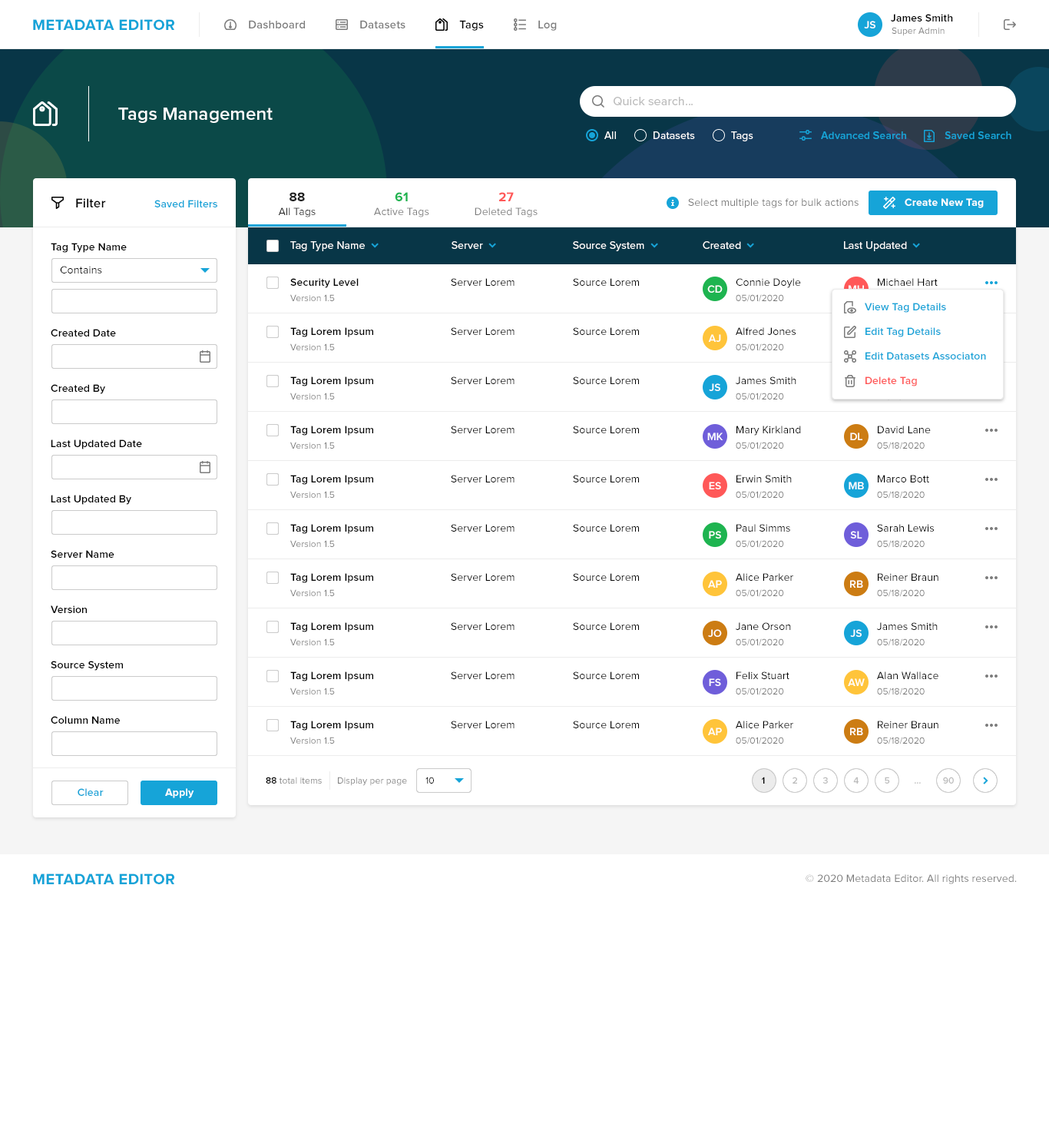
<style>
.page{position:relative;width:1049px;height:1137px;background:#ffffff}
.page>*{position:absolute;margin:0}
.t1{font:10.8px "ProximaNova-Semibold";letter-spacing:0.01em;color:#000000}
.t2{font:15.4px "ProximaNova-Bold";letter-spacing:0.025em;color:#16a4d8;text-transform:uppercase}
.t3{font:11.5px "ProximaNova-Semibold";letter-spacing:0.01em;color:#7c7c7c}
.t4{font:11.5px "ProximaNova-Semibold";letter-spacing:0.01em;color:#000000}
.t5{font:10.8px "ProximaNova-Semibold";letter-spacing:0.01em;color:#ffffff}
.t6{font:9.2px "ProximaNova-Regular";letter-spacing:0.01em;color:#7c7c7c}
.t7{font:12.3px "ProximaNova-Regular";letter-spacing:0.01em;color:#bcbcbc}
.t8{font:18.4px "ProximaNova-Semibold";letter-spacing:0.01em;color:#ffffff}
.t9{font:10.8px "ProximaNova-Regular";letter-spacing:0.01em;color:#ffffff}
.t10{font:10.8px "ProximaNova-Semibold";letter-spacing:0.01em;color:#16a4d8}
.t11{font:13.1px "ProximaNova-Bold";letter-spacing:0.01em;color:#212121}
.t12{font:13.1px "ProximaNova-Bold";letter-spacing:0.01em;color:#1eb450}
.t13{font:13.1px "ProximaNova-Bold";letter-spacing:0.01em;color:#ff5858}
.t14{font:13.1px "ProximaNova-Semibold";letter-spacing:0.01em;color:#000000}
.t15{font:10.8px "ProximaNova-Regular";letter-spacing:0.01em;color:#212121}
.t16{font:10.8px "ProximaNova-Regular";letter-spacing:0.01em;color:#7c7c7c}
.t17{font:10.8px "ProximaNova-Bold";letter-spacing:0.01em;color:#ffffff}
.t18{font:10.8px "ProximaNova-Regular";letter-spacing:0.01em;color:#000000}
.t19{font:10.8px/49.2px "ProximaNova-Semibold";letter-spacing:0.01em;color:#000000}
.t20{font:10.8px/49.2px "ProximaNova-Regular";letter-spacing:0.01em;color:#000000}
.t21{font:9.2px/49.2px "ProximaNova-Regular";letter-spacing:0.01em;color:#7c7c7c}
.t22{font:10.8px/24.6px "ProximaNova-Semibold";letter-spacing:0.01em;color:#16a4d8}
.t23{font:10.8px/24.6px "ProximaNova-Semibold";letter-spacing:0.01em;color:#ff5858}
.t24{font:9.2px "ProximaNova-Semibold";letter-spacing:0.01em;color:#000000}
.t25{font:9.2px "ProximaNova-Regular";letter-spacing:0.01em;color:#000000}
.t26{font:9.2px "ProximaNova-Semibold";letter-spacing:0.01em;color:#bcbcbc}
.t27{font:9.2px "ProximaNova-Semibold";letter-spacing:0.01em}
</style>
<div class="page">
<p class="t1" style="left:891px;top:14px;width:62px;height:8px">James Smith</p>
<p class="t2" style="left:33px;top:19px;width:141px;height:11px">Metadata Editor</p>
<p class="t3" style="left:249px;top:20px;width:56px;height:8px">Dashboard</p>
<p class="t3" style="left:360px;top:20px;width:46px;height:8px">Datasets</p>
<p class="t4" style="left:459px;top:20px;width:25px;height:11px">Tags</p>
<p class="t3" style="left:538px;top:20px;width:19px;height:11px">Log</p>
<p class="t5" style="left:864px;top:21px;width:12px;height:7px">JS</p>
<p class="t6" style="left:892px;top:27px;width:53px;height:9px">Super Admin</p>
<p class="t7" style="left:614px;top:97px;width:79px;height:9px">Quick search...</p>
<p class="t8" style="left:118px;top:108px;width:155px;height:15px">Tags Management</p>
<p class="t9" style="left:604px;top:131px;width:12px;height:8px">All</p>
<p class="t9" style="left:654px;top:131px;width:41px;height:8px">Datasets</p>
<p class="t9" style="left:731px;top:131px;width:22px;height:10px">Tags</p>
<p class="t10" style="left:821px;top:131px;width:85px;height:8px">Advanced Search</p>
<p class="t10" style="left:945px;top:131px;width:66px;height:8px">Saved Search</p>
<p class="t11" style="left:290px;top:192px;width:15px;height:9px">88</p>
<p class="t12" style="left:395px;top:192px;width:13px;height:9px">61</p>
<p class="t13" style="left:498px;top:192px;width:16px;height:9px">27</p>
<p class="t14" style="left:76px;top:198px;width:30px;height:9px">Filter</p>
<p class="t10" style="left:154px;top:200px;width:63px;height:7px">Saved Filters</p>
<p class="t15" style="left:278px;top:207px;width:38px;height:10px">All Tags</p>
<p class="t16" style="left:374px;top:207px;width:55px;height:10px">Active Tags</p>
<p class="t16" style="left:475px;top:207px;width:63px;height:10px">Deleted Tags</p>
<p class="t16" style="left:688px;top:198px;width:171px;height:10px">Select multiple tags for bulk actions</p>
<p class="t17" style="left:905px;top:198px;width:79px;height:10px">Create New Tag</p>
<p class="t1" style="left:51px;top:243px;width:76px;height:10px">Tag Type Name</p>
<p class="t9" style="left:290px;top:241px;width:75px;height:10px">Tag Type Name</p>
<p class="t9" style="left:452px;top:241px;width:31px;height:8px">Server</p>
<p class="t9" style="left:573px;top:241px;width:71px;height:10px">Source System</p>
<p class="t9" style="left:703px;top:241px;width:38px;height:8px">Created</p>
<p class="t9" style="left:844px;top:241px;width:63px;height:10px">Last Updated</p>
<p class="t18" style="left:60px;top:266px;width:42px;height:7px">Contains</p>
<p class="t19" style="left:290px;top:278px;width:83px;height:452px">Security Level<br>Tag Lorem Ipsum<br>Tag Lorem Ipsum<br>Tag Lorem Ipsum<br>Tag Lorem Ipsum<br>Tag Lorem Ipsum<br>Tag Lorem Ipsum<br>Tag Lorem Ipsum<br>Tag Lorem Ipsum<br>Tag Lorem Ipsum</p>
<p class="t20" style="left:451px;top:278px;width:64px;height:450px">Server Lorem<br>Server Lorem<br>Server Lorem<br>Server Lorem<br>Server Lorem<br>Server Lorem<br>Server Lorem<br>Server Lorem<br>Server Lorem<br>Server Lorem</p>
<p class="t20" style="left:573px;top:278px;width:66px;height:450px">Source Lorem<br>Source Lorem<br>Source Lorem<br>Source Lorem<br>Source Lorem<br>Source Lorem<br>Source Lorem<br>Source Lorem<br>Source Lorem<br>Source Lorem</p>
<p class="t20" style="left:736px;top:278px;width:65px;height:450px">Connie Doyle<br>Alfred Jones<br>James Smith<br>Mary Kirkland<br>Erwin Smith<br>Paul Simms<br>Alice Parker<br>Jane Orson<br>Felix Stuart<br>Alice Parker</p>
<p class="t20" style="left:877px;top:278px;width:62px;height:450px">Michael Hart<br>Brian Holden<br>Jane Wells<br>David Lane<br>Marco Bott<br>Sarah Lewis<br>Reiner Braun<br>James Smith<br>Alan Wallace<br>Reiner Braun</p>
<p class="t21" style="left:736px;top:294px;width:48px;height:450px">05/01/2020<br>05/01/2020<br>05/01/2020<br>05/01/2020<br>05/01/2020<br>05/01/2020<br>05/01/2020<br>05/01/2020<br>05/01/2020<br>05/01/2020</p>
<p class="t22" style="left:865px;top:303px;width:121px;height:83px">View Tag Details<br>Edit Tag Details<br>Edit Datasets Associaton<br><span class="t23">Delete Tag</span></p>
<p class="t1" style="left:51px;top:329px;width:65px;height:7px">Created Date</p>
<p class="t1" style="left:51px;top:384px;width:54px;height:10px">Created By</p>
<p class="t1" style="left:51px;top:439px;width:91px;height:10px">Last Updated Date</p>
<p class="t1" style="left:51px;top:495px;width:80px;height:10px">Last Updated By</p>
<p class="t1" style="left:51px;top:550px;width:63px;height:8px">Server Name</p>
<p class="t1" style="left:51px;top:605px;width:36px;height:8px">Version</p>
<p class="t1" style="left:51px;top:660px;width:72px;height:10px">Source System</p>
<p class="t1" style="left:51px;top:716px;width:69px;height:7px">Column Name</p>
<p class="t6" style="left:266px;top:776px;width:56px;height:7px"><span class="t24">88</span> total items</p>
<p class="t6" style="left:338px;top:776px;width:69px;height:10px">Display per page</p>
<p class="t25" style="left:425px;top:776px;width:9px;height:7px">10</p>
<p class="t24" style="left:762px;top:776px;width:3px;height:7px">1</p>
<p class="t26" style="left:793px;top:776px;width:4px;height:7px">2</p>
<p class="t26" style="left:823px;top:776px;width:5px;height:7px">3</p>
<p class="t26" style="left:853px;top:776px;width:6px;height:7px">4</p>
<p class="t26" style="left:885px;top:776px;width:5px;height:7px">5</p>
<p class="t27" style="left:915px;top:782px;width:6px;height:1px">...</p>
<p class="t26" style="left:943px;top:776px;width:11px;height:7px">90</p>
<p class="t10" style="left:78px;top:788px;width:26px;height:8px">Clear</p>
<p class="t17" style="left:165px;top:788px;width:29px;height:10px">Apply</p>
<p class="t2" style="left:33px;top:873px;width:141px;height:11px">MetaData Editor</p>
<p class="t16" style="left:806px;top:874px;width:211px;height:10px">© 2020 Metadata Editor. All rights reserved.</p>
</div>
